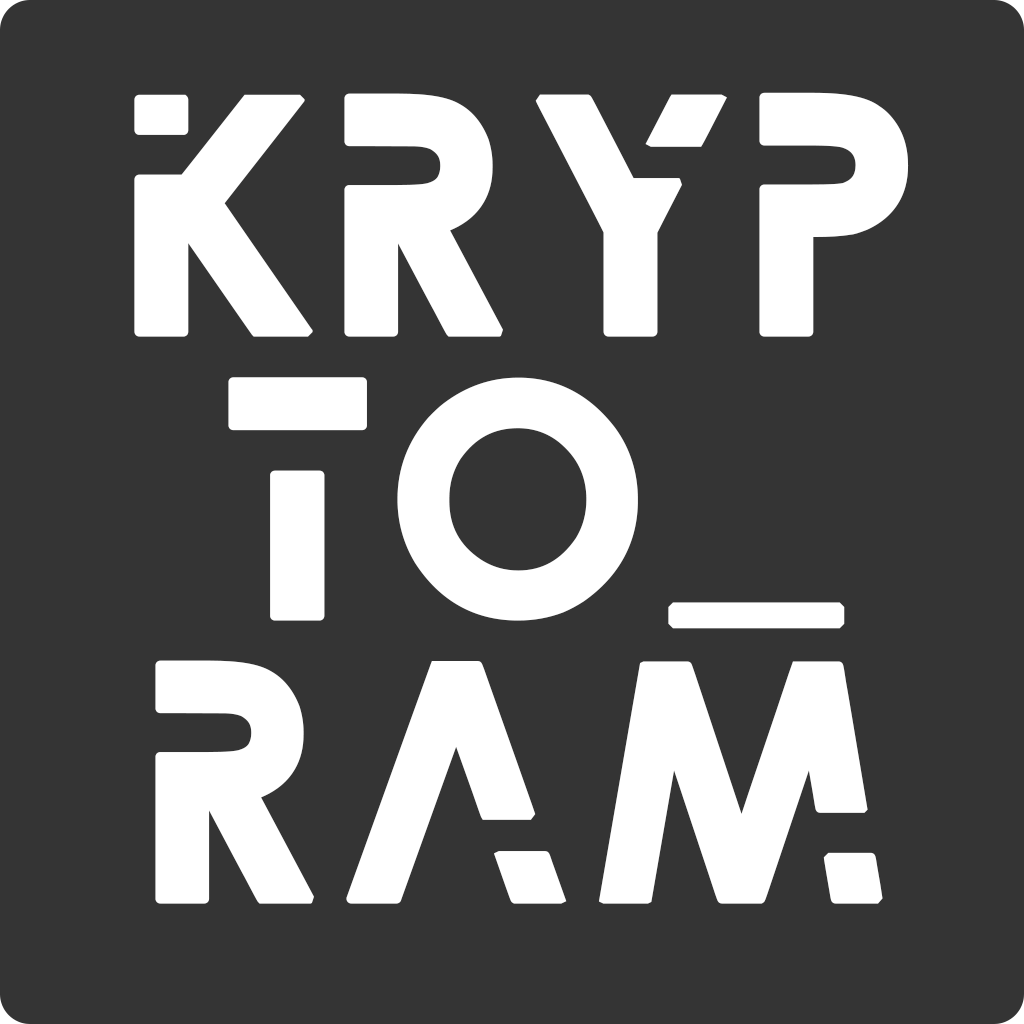
<style>
.page{position:relative;width:1024px;height:1024px;background:#343434}
.page>*{position:absolute;margin:0}
.t1{font:333.3px/283.3px "ProcrastinatingPixie";color:#ffffff;font-weight:bold}
.t2{font:333.3px/283.3px "MinionPro-Regular";color:#ffffff;font-weight:bold}
</style>
<div class="page">
<p class="t1" style="left:134px;top:92px;width:775px;height:812px;text-align:center">KRYP<br>TO<span class="t2">_<br></span>RAM</p>
</div>
